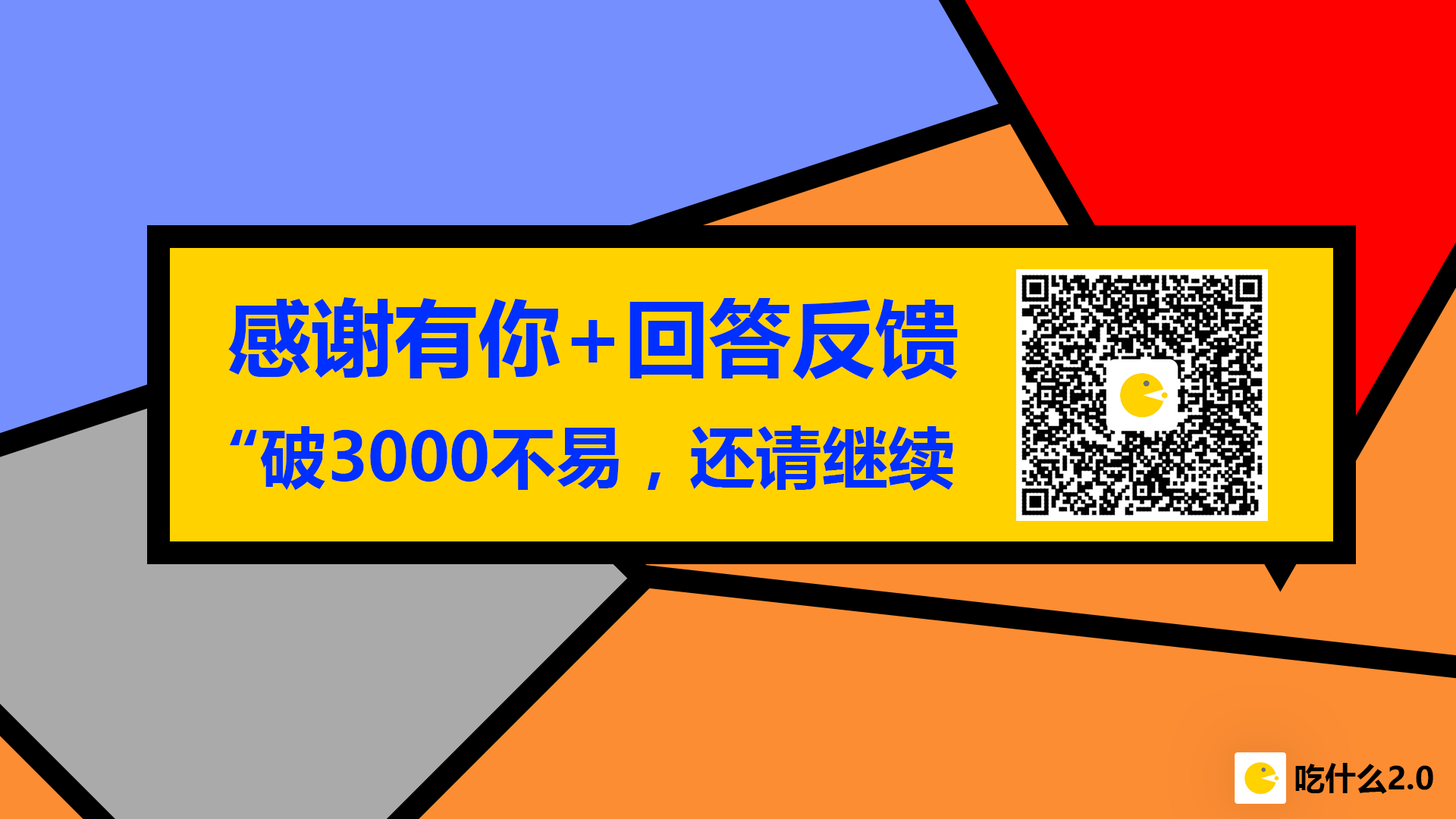
<style>
.page{position:relative;width:1456px;height:819px}
.page>*{position:absolute;margin:0}
.t1{font:83.5px "MicrosoftYaHeiUI-Bold";color:#0030ff}
.t2{font:66.3px "MicrosoftYaHeiUI-Bold";color:#0030ff}
.t3{font:31.1px "MicrosoftYaHeiUI-Bold";color:#000000}
</style>
<div class="page">
<p class="t1" style="left:228px;top:297px;width:730px;height:83px">感谢有你+回答反馈</p>
<p class="t2" style="left:230px;top:425px;width:723px;height:66px">“破3000不易，还请继续</p>
<p class="t3" style="left:1295px;top:763px;width:138px;height:31px">吃什么2.0</p>
</div>
